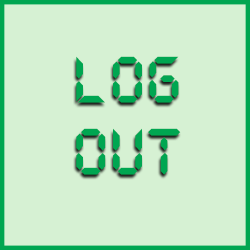
<style>
.page{position:relative;width:250px;height:250px;background:#d6f1d3}
.page>*{position:absolute;margin:0}
.t1{font:72px/72px "DS-Digital-Bold";color:#00a651}
</style>
<div class="page">
<p class="t1" style="left:76px;top:56px;width:105px;height:119px;text-align:center">Log<br>Out</p>
</div>
